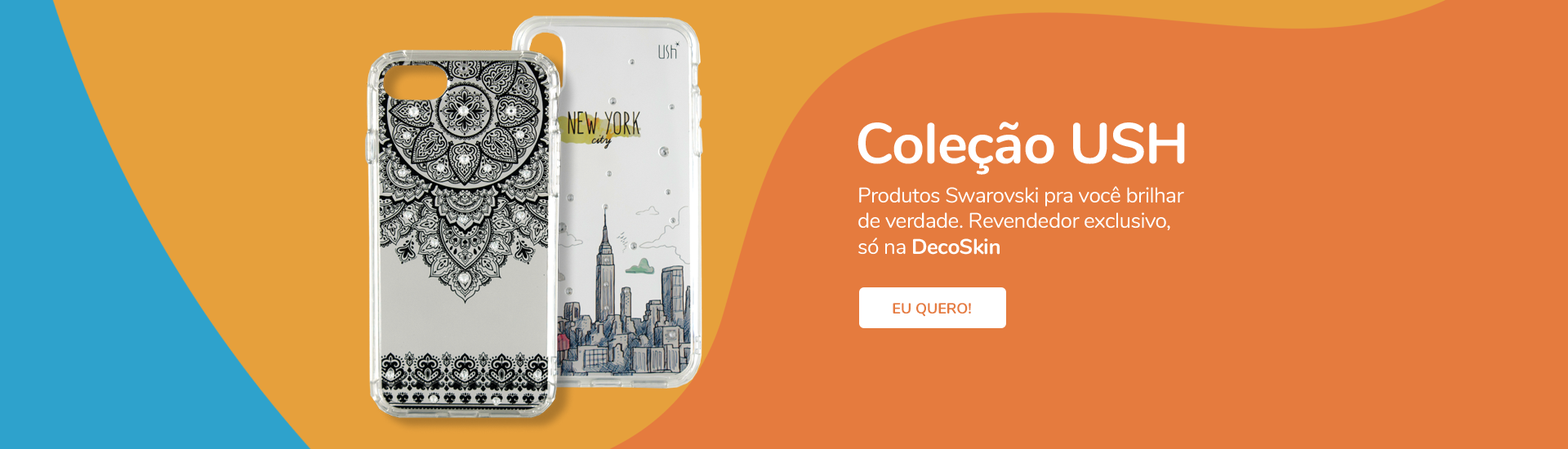
<style>
.page{position:relative;width:1568px;height:449px;background:#e57b3e}
.page>*{position:absolute;margin:0}
.t1{font:57.2px "Nunito-Bold";letter-spacing:-0.02em;color:#ffffff}
.t2{font:21.2px "Nunito-Regular";letter-spacing:-0.02em;color:#ffffff}
.t3{font:21.2px "Nunito-Bold";letter-spacing:-0.02em;color:#ffffff}
.t4{font:14.7px "Nunito-Bold";color:#e57b3e}
</style>
<div class="page">
<p class="t1" style="left:858px;top:122px;width:327px;height:53px">Coleção USH</p>
<p class="t2" style="left:858px;top:186px;width:326px;height:69px">Produtos Swarovski pra você brilhar<br>de verdade. Revendedor exclusivo,<br>só na <span class="t3">DecoSkin</span></p>
<p class="t4" style="left:893px;top:303px;width:78px;height:14px">EU QUERO!</p>
</div>
